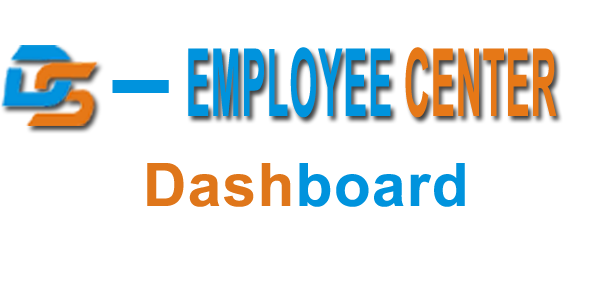
<style>
.page{position:relative;width:600px;height:300px;background:#ffffff}
.page>*{position:absolute;margin:0}
.t1{font:94.2px "Arial-BoldMT";letter-spacing:0.025em;color:#0093dd;scale:0.38 1}
.t2{font:94.2px "Arial-BoldMT";letter-spacing:0.025em;color:#e67817;scale:0.38 1}
.t3{font:94.2px "Arial-BoldMT";letter-spacing:0.025em;color:#0093dd;scale:2.2 1}
.t4{font:60px "Arial-BoldMT";letter-spacing:0.025em;color:#0093dd}
.t5{font:60px "Arial-BoldMT";letter-spacing:0.025em;color:#df761a}
</style>
<div class="page">
<p class="t1" style="left:188px;top:47px;width:369px;height:71px">EMPLOYEE <span class="t2">CENTER</span></p>
<p class="t3" style="left:112px;top:80px;width:57px;height:13px">-</p>
<p class="t4" style="left:147px;top:163px;width:318px;height:44px"><span class="t5">Dash</span>board</p>
</div>
